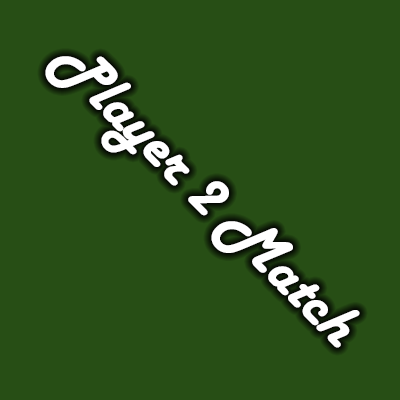
<style>
.page{position:relative;width:400px;height:400px;background:#274e15}
.page>*{position:absolute;margin:0}
.t1{font:62.5px "HarlowSolid";color:#ffffff}
</style>
<div class="page">
<p class="t1" style="left:45px;top:56px;width:315px;height:292px;rotate:45deg">Player 2 Match</p>
</div>
